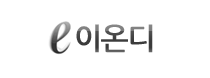
<style>
.page{position:relative;width:210px;height:78px;background:#ffffff}
.page>*{position:absolute;margin:0}
.t1{font:30px "NanumGothicBold";letter-spacing:-0.05em;color:#474747}
</style>
<div class="page">
<p class="t1" style="left:76px;top:24px;width:77px;height:29px;opacity:0.95">이온디</p>
</div>
